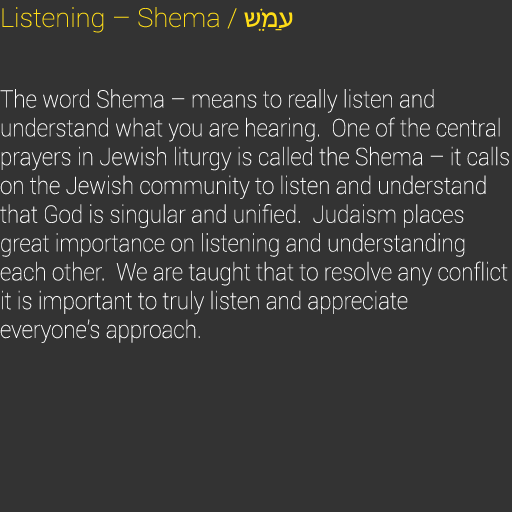
<style>
.page{position:relative;width:512px;height:512px;background:#333333}
.page>*{position:absolute;margin:0}
.t1{font:26px "Roboto-Thin";color:#ffdd17;scale:1.04 1}
.t2{font:26px "MyriadHebrew-Regular";color:#ffdd17;scale:1.04 1}
.t3{font:24px "Roboto-Thin";color:#ffffff;scale:0.93 1}
</style>
<div class="page">
<p class="t1" style="left:2px;top:7px;width:291px;height:26px">Listening – Shema / <span class="t2">שֵׁמַע</span></p>
<p class="t3" style="left:0px;top:89px;width:509px;height:254px">The word Shema – means to really listen and <br>understand what you are hearing.  One of the central prayers in Jewish liturgy is called the Shema – it calls on the Jewish community to listen and understand that God is singular and unified.  Judaism places great importance on listening and understanding each other.  We are taught that to resolve any conflict it is important to truly listen and appreciate  <br>everyone’s approach.</p>
</div>
